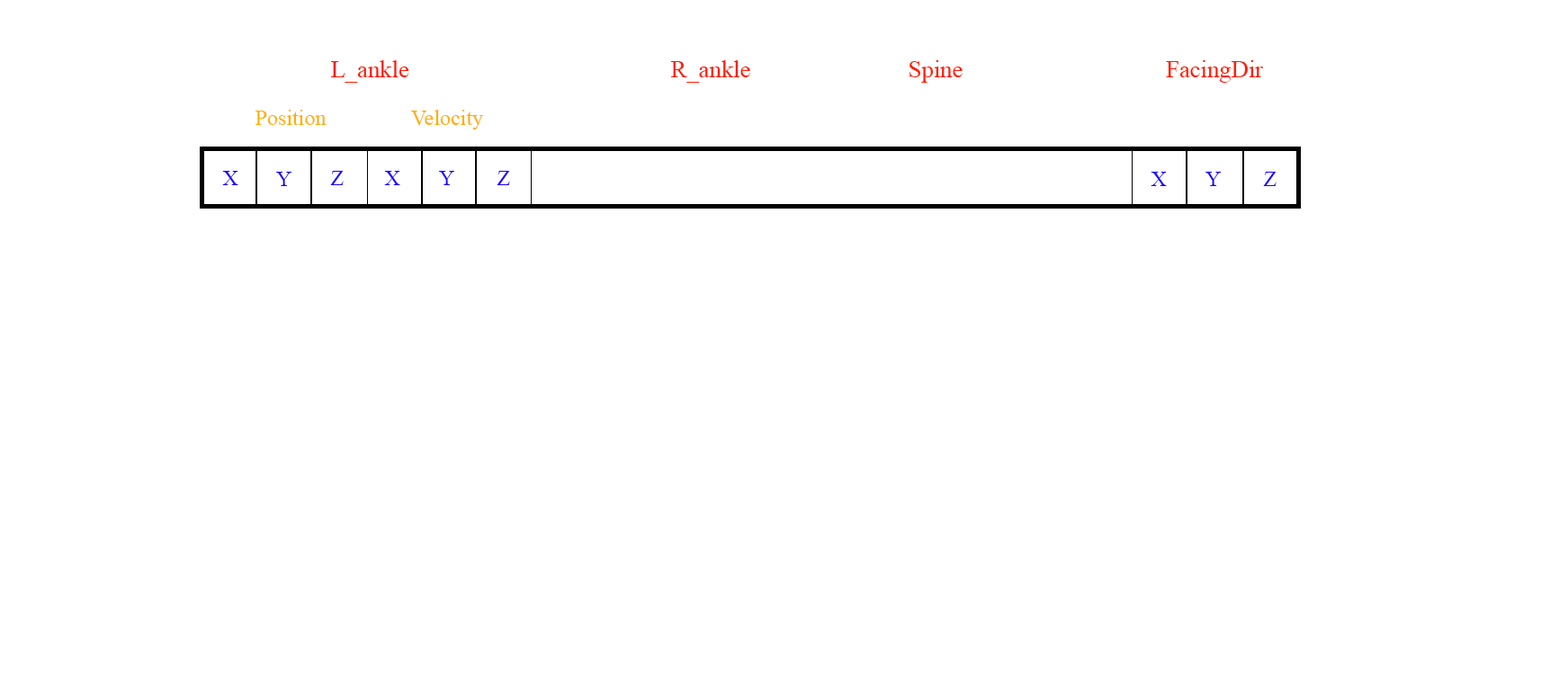
<style>
.page{position:relative;width:1568px;height:694px;background:#ffffff}
.page>*{position:absolute;margin:0}
.t1{font:24px "TimesNewRomanPSMT";color:#ff1e00}
.t2{font:21.6px "TimesNewRomanPSMT";color:#ffae00}
.t3{font:21.6px "TimesNewRomanPSMT";color:#1e00ff}
</style>
<div class="page">
<p class="t1" style="left:330px;top:60px;width:79px;height:23px">L_ankle</p>
<p class="t1" style="left:670px;top:60px;width:80px;height:23px">R_ankle</p>
<p class="t1" style="left:909px;top:60px;width:54px;height:23px">Spine</p>
<p class="t1" style="left:1166px;top:60px;width:98px;height:23px">FacingDir</p>
<p class="t2" style="left:255px;top:110px;width:72px;height:15px">Position</p>
<p class="t2" style="left:411px;top:110px;width:72px;height:20px">Velocity</p>
<p class="t3" style="left:222px;top:171px;width:16px;height:14px">X</p>
<p class="t3" style="left:276px;top:172px;width:15px;height:14px">Y</p>
<p class="t3" style="left:330px;top:171px;width:14px;height:14px">Z</p>
<p class="t3" style="left:384px;top:171px;width:16px;height:14px">X</p>
<p class="t3" style="left:439px;top:171px;width:15px;height:14px">Y</p>
<p class="t3" style="left:497px;top:171px;width:13px;height:14px">Z</p>
<p class="t3" style="left:1151px;top:172px;width:16px;height:14px">X</p>
<p class="t3" style="left:1205px;top:172px;width:17px;height:14px">Y</p>
<p class="t3" style="left:1263px;top:172px;width:14px;height:14px">Z</p>
</div>
